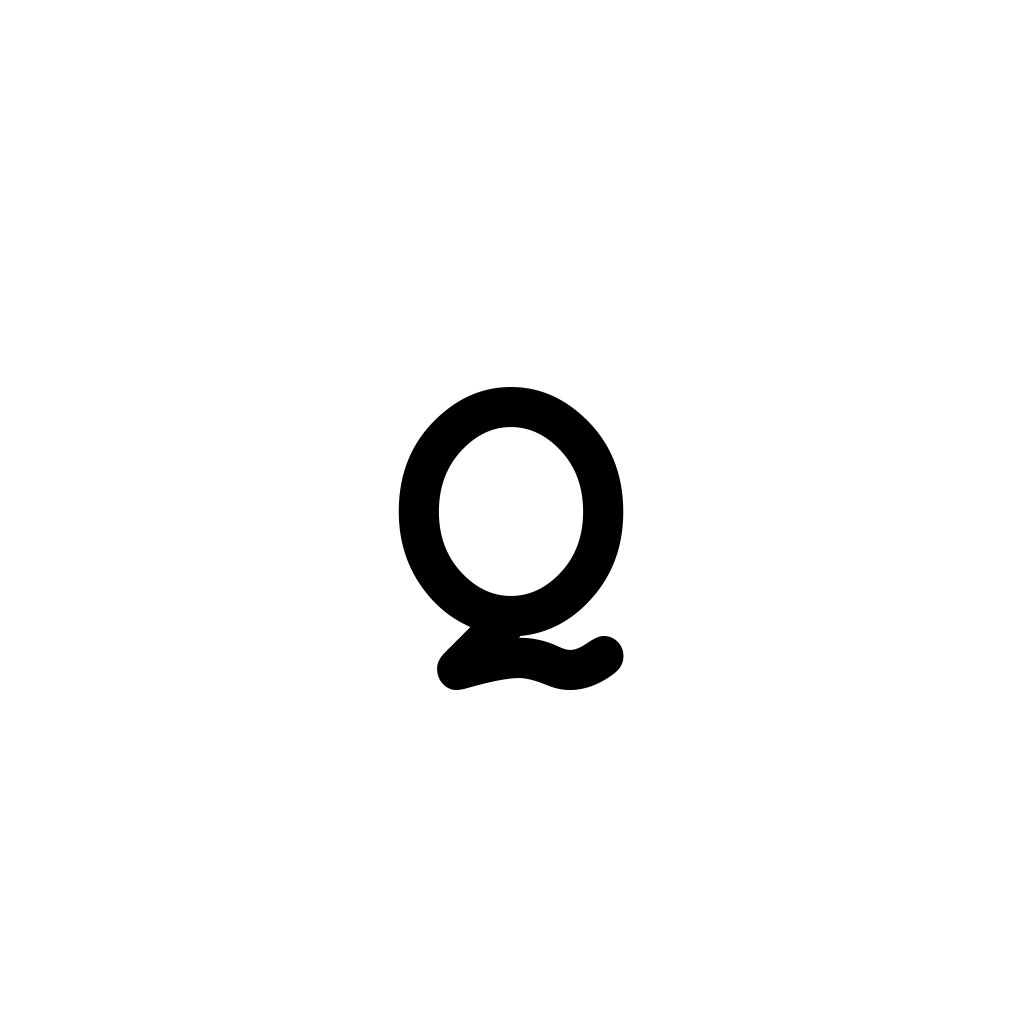
<style>
.page{position:relative;width:1024px;height:1024px;background:#ffffff}
.page>*{position:absolute;margin:0}
.t1{font:400px "CourierNewPS-BoldMT";color:#000000}
</style>
<div class="page">
<p class="t1" style="left:398px;top:387px;width:226px;height:303px">Q</p>
</div>
